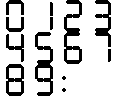
<style>
.page{position:relative;width:116px;height:96px;background:#ffffff}
.page>*{position:absolute;margin:0}
.t1{font:44px "DigitalReadoutUpright";letter-spacing:0.05em;color:#000000;font-weight:bold}
</style>
<div class="page">
<p class="t1" style="left:6px;top:0px;width:18px;height:32px">0</p>
<p class="t1" style="left:50px;top:2px;width:3px;height:28px">1</p>
<p class="t1" style="left:64px;top:0px;width:18px;height:32px">2</p>
<p class="t1" style="left:95px;top:0px;width:16px;height:32px">3</p>
<p class="t1" style="left:6px;top:34px;width:18px;height:28px">4</p>
<p class="t1" style="left:35px;top:32px;width:18px;height:32px">5</p>
<p class="t1" style="left:64px;top:32px;width:18px;height:32px">6</p>
<p class="t1" style="left:95px;top:32px;width:16px;height:30px">7</p>
<p class="t1" style="left:6px;top:64px;width:18px;height:32px">8</p>
<p class="t1" style="left:35px;top:64px;width:18px;height:32px">9</p>
<p class="t1" style="left:62px;top:76px;width:4px;height:16px">:</p>
</div>
